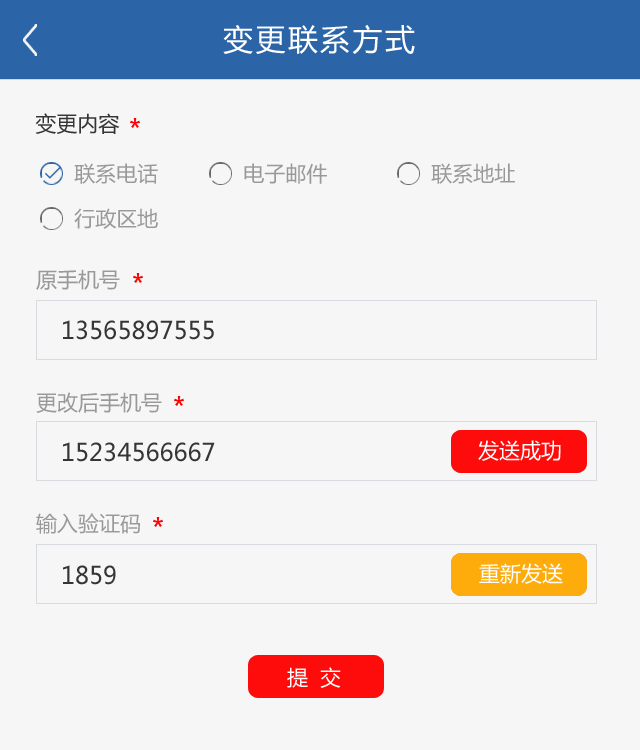
<style>
.page{position:relative;width:640px;height:750px;background:#f6f6f6}
.page>*{position:absolute;margin:0}
.t1{font:30px "MicrosoftYaHei";letter-spacing:0.08em;color:#ffffff}
.t2{font:21px "MicrosoftYaHei";color:#353535}
.t3{font:21px "MicrosoftYaHei";color:#999999}
.t4{font:24px "MicrosoftYaHei";color:#353535}
.t5{font:21px "MicrosoftYaHei";color:#ffffff}
.t6{font:21px "MicrosoftYaHei";letter-spacing:0.14em;color:#ffffff}
</style>
<div class="page">
<p class="t1" style="left:223px;top:25px;width:192px;height:29px">变更联系方式</p>
<p class="t2" style="left:35px;top:113px;width:85px;height:21px">变更内容</p>
<p class="t3" style="left:74px;top:163px;width:84px;height:21px">联系电话</p>
<p class="t3" style="left:244px;top:163px;width:83px;height:21px">电子邮件</p>
<p class="t3" style="left:431px;top:163px;width:84px;height:21px">联系地址</p>
<p class="t3" style="left:74px;top:208px;width:84px;height:21px">行政区地</p>
<p class="t3" style="left:36px;top:269px;width:84px;height:21px">原手机号</p>
<p class="t4" style="left:63px;top:320px;width:151px;height:20px">13565897555</p>
<p class="t3" style="left:36px;top:392px;width:126px;height:21px">更改后手机号</p>
<p class="t4" style="left:63px;top:442px;width:152px;height:20px">15234566667</p>
<p class="t5" style="left:478px;top:440px;width:83px;height:21px">发送成功</p>
<p class="t3" style="left:36px;top:513px;width:104px;height:21px">输入验证码</p>
<p class="t4" style="left:63px;top:565px;width:53px;height:20px">1859</p>
<p class="t5" style="left:479px;top:563px;width:84px;height:21px">重新发送</p>
<p class="t6" style="left:287px;top:667px;width:54px;height:21px">提 交</p>
</div>
